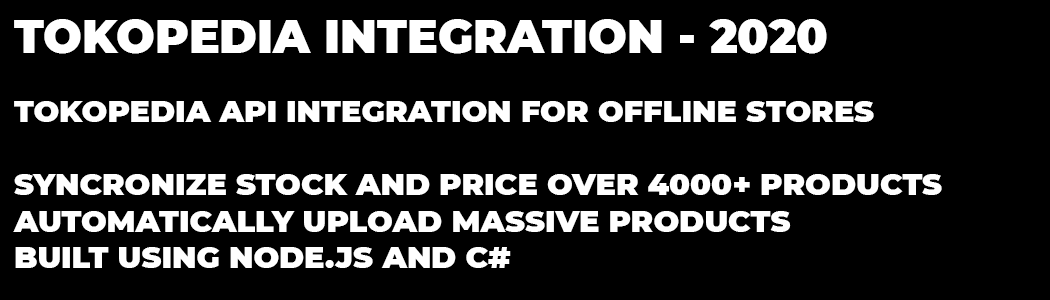
<style>
.page{position:relative;width:1050px;height:300px;background:#000000}
.page>*{position:absolute;margin:0}
.t1{font:45.8px "Montserrat-Black";color:#ffffff}
.t2{font:30.4px "Montserrat-Black";color:#ffffff}
</style>
<div class="page">
<p class="t1" style="left:14px;top:19px;width:813px;height:35px">TOKOPEDIA INTEGRATION - 2020</p>
<p class="t2" style="left:13px;top:101px;width:929px;height:167px">TOKOPEDIA API INTEGRATION FOR OFFLINE STORES<br><br>SYNCRONIZE STOCK AND PRICE OVER 4000+ PRODUCTS<br>AUTOMATICALLY UPLOAD MASSIVE PRODUCTS<br>BUILT USING NODE.JS AND C#</p>
</div>
